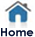
<style>
.page{position:relative;width:35px;height:37px;background:#ffffff}
.page>*{position:absolute;margin:0}
.t1{font:11.6px "CenturyGothic-Bold";color:#040e2f}
</style>
<div class="page">
<p class="t1" style="left:1px;top:28px;width:33px;height:9px">Home</p>
</div>
